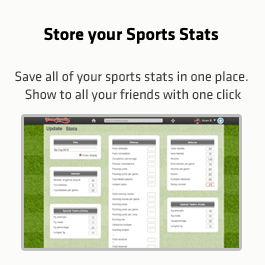
<style>
.page{position:relative;width:265px;height:265px;background:#fbfbf9}
.page>*{position:absolute;margin:0}
.t1{font:18px "Klavika-Bold";color:#000000}
.t2{font:14px/18px "Klavika-Regular";color:#3e3d39}
</style>
<div class="page">
<p class="t1" style="left:44px;top:27px;width:174px;height:17px">Store your Sports Stats</p>
<p class="t2" style="left:15px;top:71px;width:233px;height:31px;text-align:center">Save all of your sports stats in one place. <br>Show to all your friends with one click</p>
</div>
